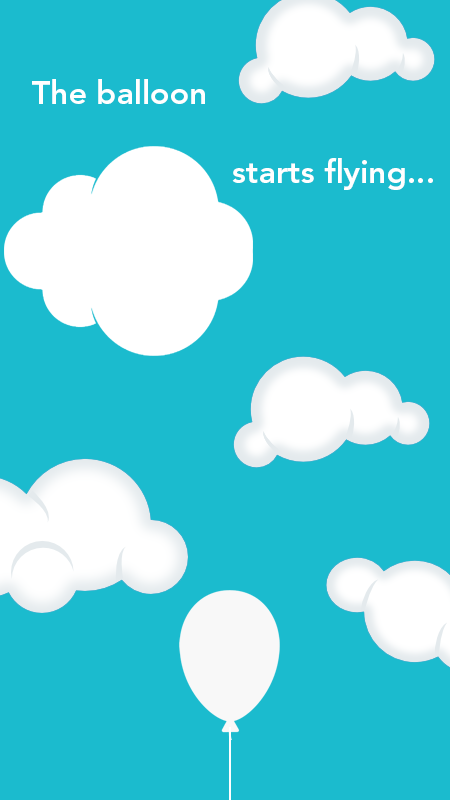
<style>
.page{position:relative;width:450px;height:800px;background:#1bbbce}
.page>*{position:absolute;margin:0}
.t1{font:32px "AvenirLTStd-Heavy";color:#ffffff}
</style>
<div class="page">
<p class="t1" style="left:32px;top:79px;width:173px;height:25px">The balloon</p>
<p class="t1" style="left:232px;top:158px;width:201px;height:32px">starts flying...</p>
</div>
